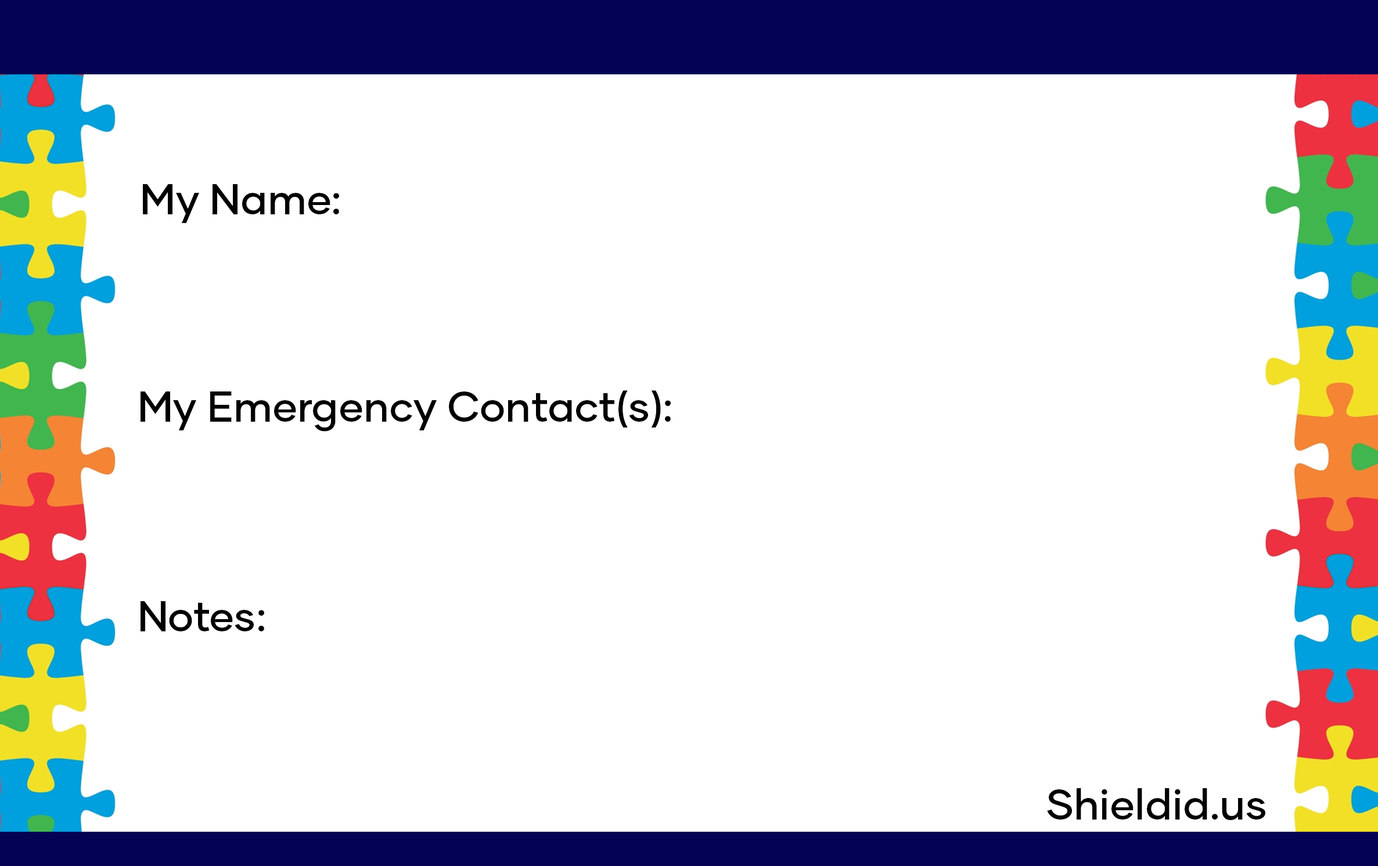
<style>
.page{position:relative;width:1378px;height:866px;background:#ffffff}
.page>*{position:absolute;margin:0}
.t1{font:42.1px "GilmerMedium";color:#000000}
</style>
<div class="page">
<p class="t1" style="left:143px;top:184px;width:196px;height:39px">My Name:</p>
<p class="t1" style="left:140px;top:390px;width:531px;height:41px">My Emergency Contact(s):</p>
<p class="t1" style="left:140px;top:601px;width:124px;height:30px">Notes:</p>
<p class="t1" style="left:1047px;top:788px;width:218px;height:32px">Shieldid.us</p>
</div>
